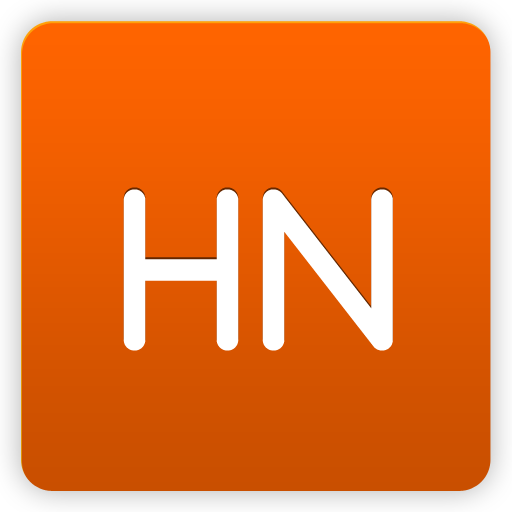
<style>
.page{position:relative;width:512px;height:512px}
.page>*{position:absolute;margin:0}
.t1{font:205.9px "Comfortaa-Bold";letter-spacing:0.05em;color:#ffffff}
</style>
<div class="page">
<p class="t1" style="left:123px;top:189px;width:270px;height:162px">HN</p>
</div>
